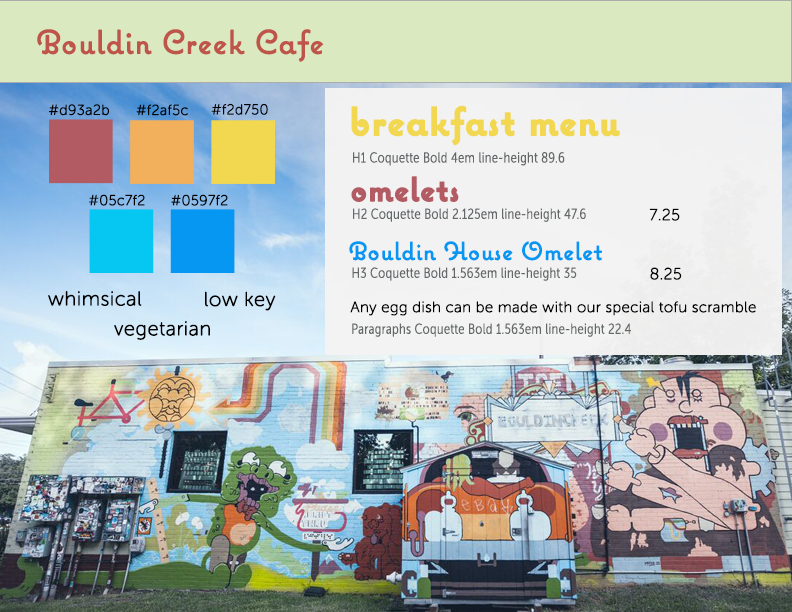
<style>
.page{position:relative;width:792px;height:612px}
.page>*{position:absolute;margin:0}
.t1{font:33px "Coquette";letter-spacing:0.01em;color:#bf544b;font-weight:bold}
.t2{font:14.3px "MuseoSansRounded-100";letter-spacing:0.01em;color:#000000;font-weight:bold}
.t3{font:40px "Coquette-Bold";letter-spacing:0.01em;color:#f2d750;font-weight:bold}
.t4{font:14px "MuseoSansCond-100";letter-spacing:0.01em;color:#646869;font-weight:bold}
.t5{font:34px "Coquette-Bold";letter-spacing:0.01em;color:#b25b62;font-weight:bold}
.t6{font:16px "MuseoSansRounded-100";letter-spacing:0.01em;color:#000000;font-weight:bold}
.t7{font:25px "Coquette";letter-spacing:0.01em;color:#0597f2;font-weight:bold}
.t8{font:20px "MuseoSansRounded-100";letter-spacing:0.01em;color:#000000;font-weight:bold}
.t9{font:15px "MuseoSansRounded-100";letter-spacing:0.01em;color:#000000;font-weight:bold}
</style>
<div class="page">
<p class="t1" style="left:37px;top:29px;width:287px;height:33px">Bouldin Creek Cafe</p>
<p class="t2" style="left:49px;top:104px;width:60px;height:12px">#d93a2b</p>
<p class="t2" style="left:136px;top:104px;width:52px;height:12px">#f2af5c</p>
<p class="t2" style="left:211px;top:103px;width:57px;height:12px">#f2d750</p>
<p class="t3" style="left:351px;top:105px;width:269px;height:41px">breakfast menu</p>
<p class="t4" style="left:353px;top:152px;width:212px;height:14px">H1 Coquette Bold 4em line-height 89.6</p>
<p class="t5" style="left:351px;top:176px;width:108px;height:26px">omelets</p>
<p class="t2" style="left:89px;top:194px;width:56px;height:12px">#05c7f2</p>
<p class="t2" style="left:171px;top:194px;width:57px;height:12px">#0597f2</p>
<p class="t4" style="left:353px;top:208px;width:233px;height:14px">H2 Coquette Bold 2.125em line-height 47.6</p>
<p class="t6" style="left:649px;top:208px;width:31px;height:13px">7.25</p>
<p class="t7" style="left:349px;top:241px;width:253px;height:20px">Bouldin House Omelet</p>
<p class="t4" style="left:352px;top:267px;width:225px;height:14px">H3 Coquette Bold 1.563em line-height 35</p>
<p class="t6" style="left:650px;top:267px;width:32px;height:13px">8.25</p>
<p class="t8" style="left:48px;top:291px;width:94px;height:15px">whimsical</p>
<p class="t8" style="left:205px;top:291px;width:71px;height:20px">low key</p>
<p class="t9" style="left:350px;top:301px;width:406px;height:15px">Any egg dish can be made with our special tofu scramble</p>
<p class="t8" style="left:114px;top:321px;width:96px;height:19px">vegetarian</p>
<p class="t4" style="left:352px;top:323px;width:279px;height:14px">Paragraphs Coquette Bold 1.563em line-height 22.4</p>
</div>
